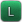
<style>
.page{position:relative;width:22px;height:22px}
.page>*{position:absolute;margin:0}
.t1{font:12.8px "MyriadPro-Regular";color:#aac0b8}
</style>
<div class="page">
<p class="t1" style="left:8px;top:7px;width:6px;height:9px">L</p>
</div>
